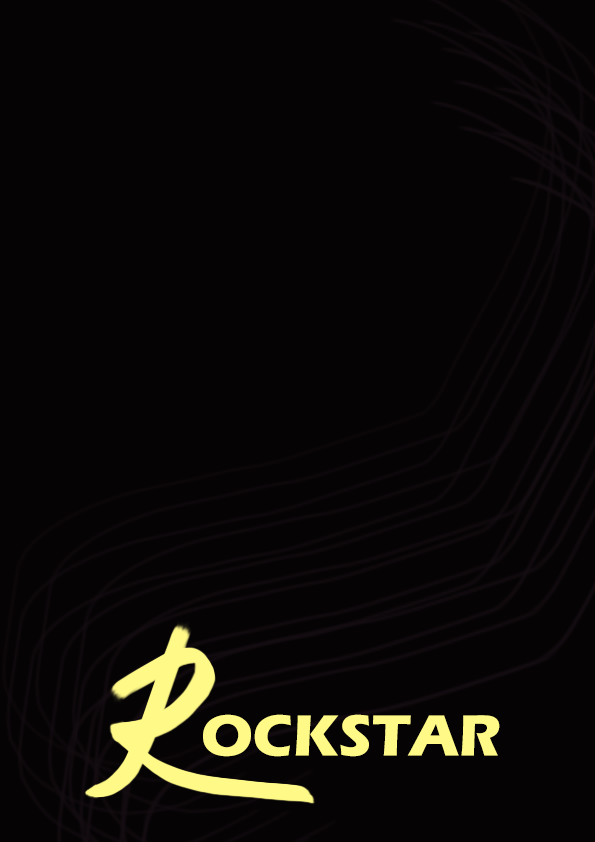
<style>
.page{position:relative;width:595px;height:842px;background:#050304}
.page>*{position:absolute;margin:0}
.t1{font:60px "ErasITC-Bold";color:#fff987}
</style>
<div class="page">
<p class="t1" style="left:203px;top:714px;width:297px;height:43px">OCKSTAR</p>
</div>
